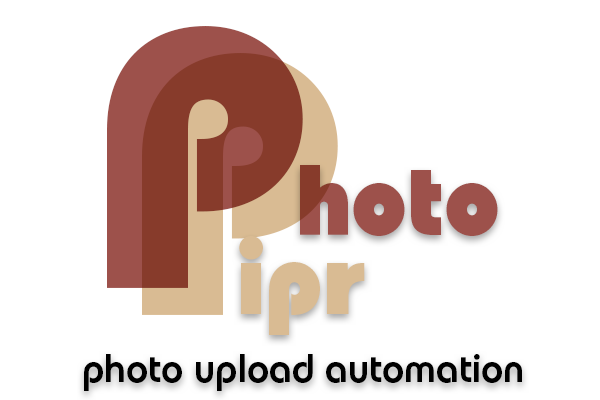
<style>
.page{position:relative;width:600px;height:400px;background:#ffffff}
.page>*{position:absolute;margin:0}
.t1{font:367.9px "BauhausITCbyBT-Heavy";color:#9e514b}
.t2{font:367.9px "BauhausITCbyBT-Heavy";color:#dabc93}
.t3{font:100px "BauhausITCbyBT-Heavy";color:#9e514b}
.t4{font:100px "BauhausITCbyBT-Heavy";color:#dabc93}
.t5{font:40.3px "BauhausITCbyBT-Demi";color:#000000}
</style>
<div class="page">
<p class="t1" style="left:107px;top:26px;width:196px;height:262px">P</p>
<p class="t2" style="left:142px;top:53px;width:196px;height:262px">P</p>
<p class="t3" style="left:300px;top:165px;width:198px;height:71px">hoto</p>
<p class="t4" style="left:239px;top:236px;width:126px;height:99px">ipr</p>
<p class="t5" style="left:84px;top:354px;width:438px;height:37px">photo upload automation</p>
</div>
